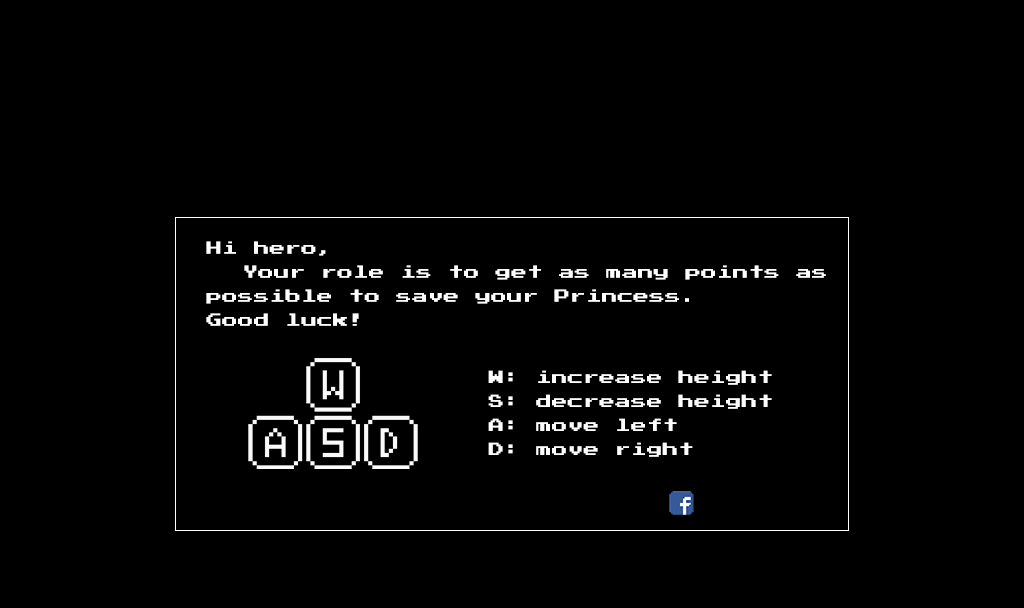
<style>
.page{position:relative;width:1024px;height:608px;background:#000000}
.page>*{position:absolute;margin:0}
.t1{font:14px/24px "PressStart2P";color:#ffffff;scale:1.13 1}
</style>
<div class="page">
<p class="t1" style="left:206px;top:241px;width:620px;height:85px">Hi hero,<br> Your role is to get as many points as  possible to save your Princess.<br>Good luck!</p>
<p class="t1" style="left:488px;top:370px;width:284px;height:87px">W: increase height<br>S: decrease height<br>A: move left<br>D: move right</p>
</div>
